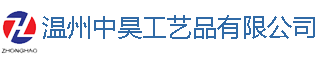
<style>
.page{position:relative;width:320px;height:60px;background:#ffffff}
.page>*{position:absolute;margin:0}
.t1{font:25px "MicrosoftYaHei";color:#306aa6}
</style>
<div class="page">
<p class="t1" style="left:42px;top:15px;width:273px;height:24px">温州中昊工艺品有限公司</p>
</div>
